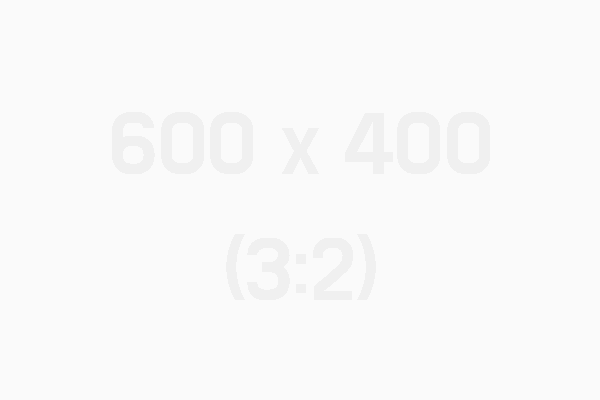
<style>
.page{position:relative;width:600px;height:400px;background:#fafafa}
.page>*{position:absolute;margin:0}
.t1{font:72px "BMDoHyeon-OTF";color:#f0f0f0}
</style>
<div class="page">
<p class="t1" style="left:112px;top:112px;width:378px;height:188px;text-align:center">600 x 400<br>(3:2)</p>
</div>
